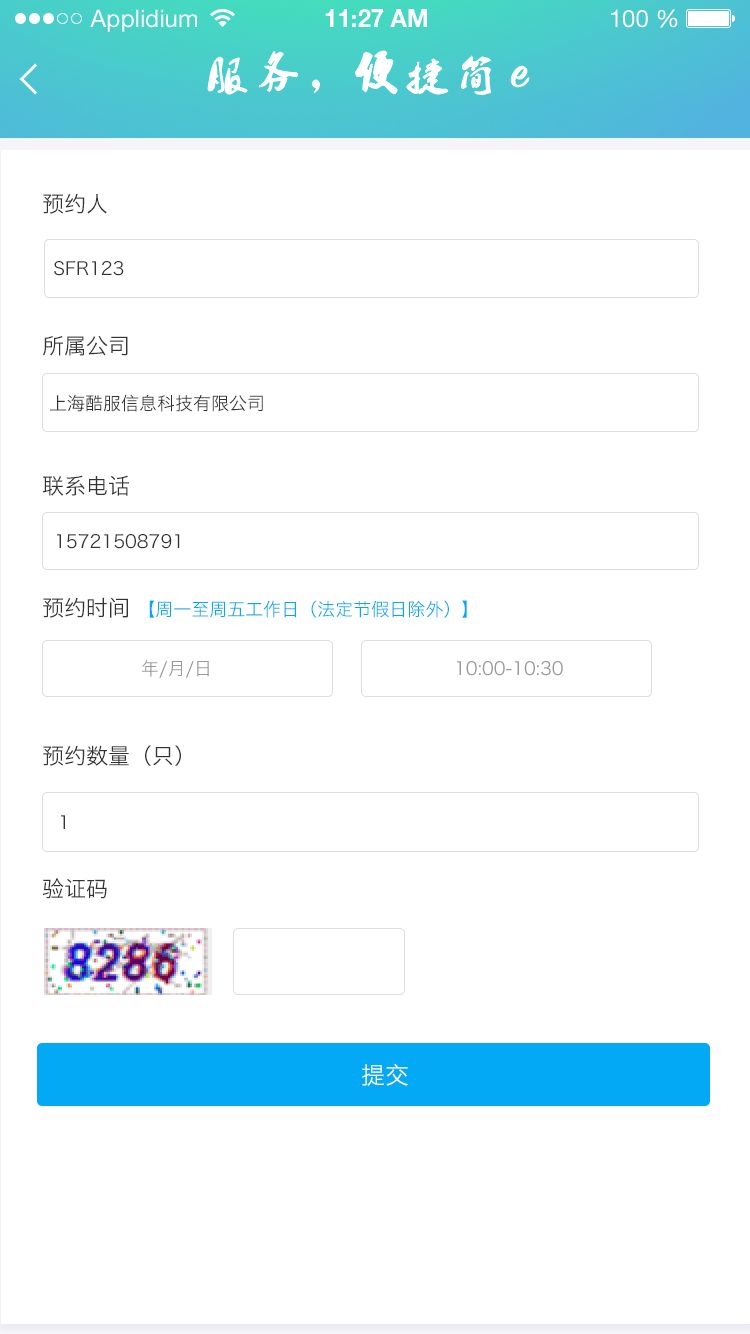
<style>
.page{position:relative;width:750px;height:1334px;background:#ffffff}
.page>*{position:absolute;margin:0}
.t1{font:24px "HelveticaNeueLTStd-Roman";color:#ffffff}
.t2{font:24px "HelveticaNeueLTStd-Bd";color:#ffffff}
.t3{font:22px "HiraginoSansGB-W3";color:#333333;text-transform:uppercase}
.t4{font:18px "HiraginoSansGB-W3";color:#333333;text-transform:uppercase}
.t5{font:18px "HiraginoSansGB-W3";color:#03a9f4;text-transform:uppercase}
.t6{font:18px "HiraginoSansGB-W3";color:#999999;text-transform:uppercase}
.t7{font:24px "HiraginoSansGB-W3";color:#ffffff;text-transform:uppercase}
</style>
<div class="page">
<p class="t1" style="left:90px;top:9px;width:107px;height:23px">Applidium</p>
<p class="t2" style="left:325px;top:9px;width:102px;height:18px">11:27 AM</p>
<p class="t1" style="left:611px;top:9px;width:67px;height:19px">100 %</p>
<p class="t3" style="left:43px;top:193px;width:64px;height:21px">预约人</p>
<p class="t4" style="left:54px;top:261px;width:70px;height:15px">sfr123</p>
<p class="t3" style="left:42px;top:335px;width:86px;height:21px">所属公司</p>
<p class="t4" style="left:50px;top:394px;width:213px;height:18px">上海酷服信息科技有限公司</p>
<p class="t3" style="left:43px;top:475px;width:86px;height:21px">联系电话</p>
<p class="t4" style="left:57px;top:534px;width:123px;height:15px">15721508791</p>
<p class="t5" style="left:43px;top:597px;width:424px;height:21px"><span class="t3">预约时间 </span>【周一至周五工作日（法定节假日除外）】</p>
<p class="t6" style="left:142px;top:660px;width:67px;height:18px">年/月/日</p>
<p class="t6" style="left:457px;top:661px;width:106px;height:15px">10:00-10:30</p>
<p class="t3" style="left:43px;top:745px;width:138px;height:21px">预约数量（只）</p>
<p class="t4" style="left:61px;top:815px;width:4px;height:14px">1</p>
<p class="t3" style="left:42px;top:878px;width:65px;height:21px">验证码</p>
<p class="t7" style="left:362px;top:1064px;width:46px;height:22px">提交</p>
</div>
